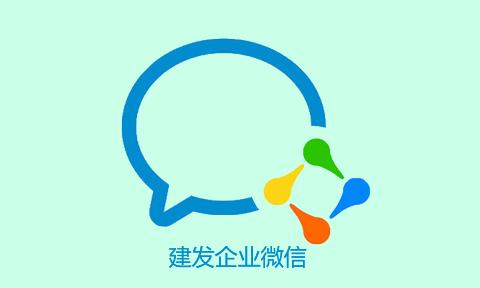
<style>
.page{position:relative;width:480px;height:288px;background:#caffe8}
.page>*{position:absolute;margin:0}
.t1{font:23px "MicrosoftYaHei";color:#028ecf}
</style>
<div class="page">
<p class="t1" style="left:169px;top:245px;width:138px;height:24px">建发企业微信</p>
</div>
